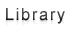
<style>
.page{position:relative;width:70px;height:32px;background:#ffffff}
.page>*{position:absolute;margin:0}
.t1{font:16.7px "ArialMT";letter-spacing:0.1em}
</style>
<div class="page">
<p class="t1" style="left:6px;top:8px;width:59px;height:16px">Library</p>
<p class="t1" style="left:6px;top:8px;width:59px;height:16px">Library</p>
</div>
